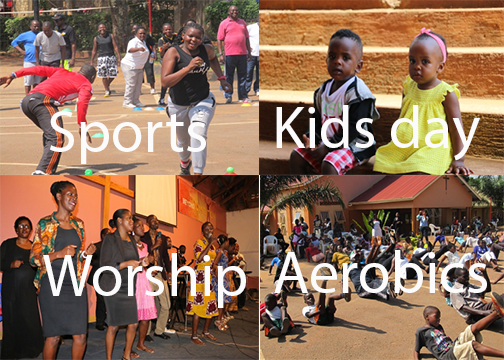
<style>
.page{position:relative;width:504px;height:360px}
.page>*{position:absolute;margin:0}
.t1{font:60px "MyriadPro-Regular";color:#fcfbfb}
</style>
<div class="page">
<p class="t1" style="left:50px;top:111px;width:156px;height:53px">Sports</p>
<p class="t1" style="left:276px;top:105px;width:204px;height:56px">Kids day</p>
<p class="t1" style="left:43px;top:253px;width:203px;height:55px">Worship</p>
<p class="t1" style="left:274px;top:250px;width:213px;height:43px">Aerobics</p>
</div>
